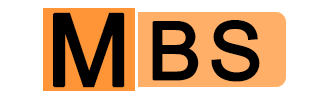
<style>
.page{position:relative;width:330px;height:100px;background:#ffffff}
.page>*{position:absolute;margin:0}
.t1{font:100px "ArialMT";letter-spacing:0.07em;color:#000000;text-transform:uppercase;font-weight:bold}
.t2{font:80px "ArialMT";letter-spacing:0.07em;color:#000000;text-transform:uppercase;font-weight:bold}
</style>
<div class="page">
<p class="t1" style="left:53px;top:12px;width:72px;height:76px">m</p>
<p class="t2" style="left:152px;top:20px;width:108px;height:62px">bs</p>
</div>
